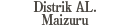
<style>
.page{position:relative;width:130px;height:27px;background:#ffffff}
.page>*{position:absolute;margin:0}
.t1{font:14px/13px "RyuminPro-ExBold";letter-spacing:-0.04em;color:#4c4843;scale:0.9 1}
</style>
<div class="page">
<p class="t1" style="left:33px;top:1px;width:63px;height:24px;text-align:center">Distrik AL.<br>Maizuru</p>
</div>
